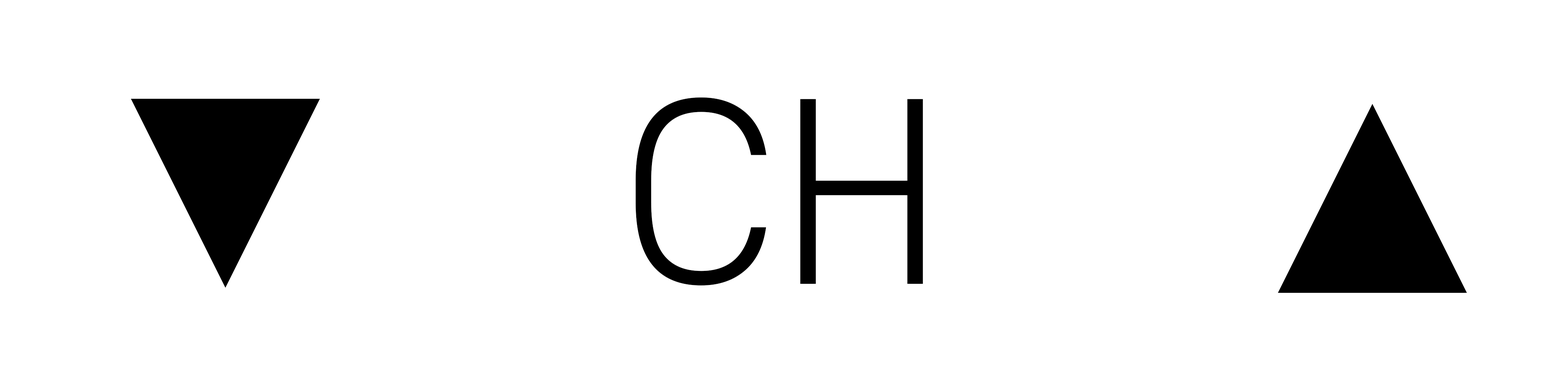
<style>
.page{position:relative;width:1568px;height:392px;background:#ffffff}
.page>*{position:absolute;margin:0}
.t1{font:267.9px "DIN2014-Light";color:#000000}
</style>
<div class="page">
<p class="t1" style="left:635px;top:97px;width:288px;height:189px">CH</p>
</div>
